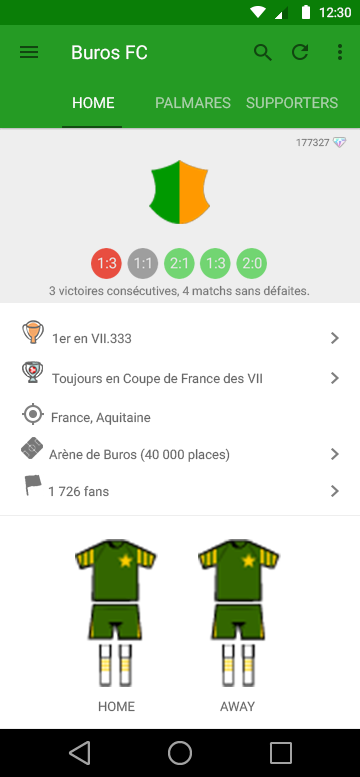
<style>
.page{position:relative;width:360px;height:777px;background:#ffffff}
.page>*{position:absolute;margin:0}
.t1{font:13px "Roboto-Regular";color:#ffffff}
.t2{font:19px "Roboto-Regular";color:#ffffff}
.t3{font:15px "Roboto-Regular";color:#ffffff}
.t4{font:15px "Roboto-Regular";color:#aad1aa}
.t5{font:10px "Roboto-Regular";color:#777777}
.t6{font:12px "Roboto-Regular";color:#777777}
.t7{font:13px "Roboto-Regular";color:#676767}
</style>
<div class="page">
<p class="t1" style="left:319px;top:7px;width:32px;height:11px">12:30</p>
<p class="t2" style="left:72px;top:45px;width:75px;height:15px">Buros FC</p>
<p class="t3" style="left:73px;top:97px;width:42px;height:12px">HOME</p>
<p class="t4" style="left:156px;top:97px;width:75px;height:12px">PALMARES</p>
<p class="t4" style="left:246px;top:97px;width:92px;height:12px">SUPPORTERS</p>
<p class="t5" style="left:296px;top:138px;width:34px;height:9px">177327</p>
<p class="t6" style="left:49px;top:285px;width:261px;height:12px">3 victoires consécutives, 4 matchs sans défaites.</p>
<p class="t7" style="left:52px;top:333px;width:80px;height:11px">1er en VII.333</p>
<p class="t7" style="left:52px;top:373px;width:210px;height:13px">Toujours en Coupe de France des VII</p>
<p class="t7" style="left:51px;top:412px;width:100px;height:13px">France, Aquitaine</p>
<p class="t7" style="left:49px;top:448px;width:181px;height:14px">Arène de Buros (40 000 places)</p>
<p class="t7" style="left:48px;top:485px;width:61px;height:12px">1 726 fans</p>
<p class="t7" style="left:98px;top:701px;width:37px;height:11px">HOME</p>
<p class="t7" style="left:220px;top:701px;width:35px;height:11px">AWAY</p>
</div>
